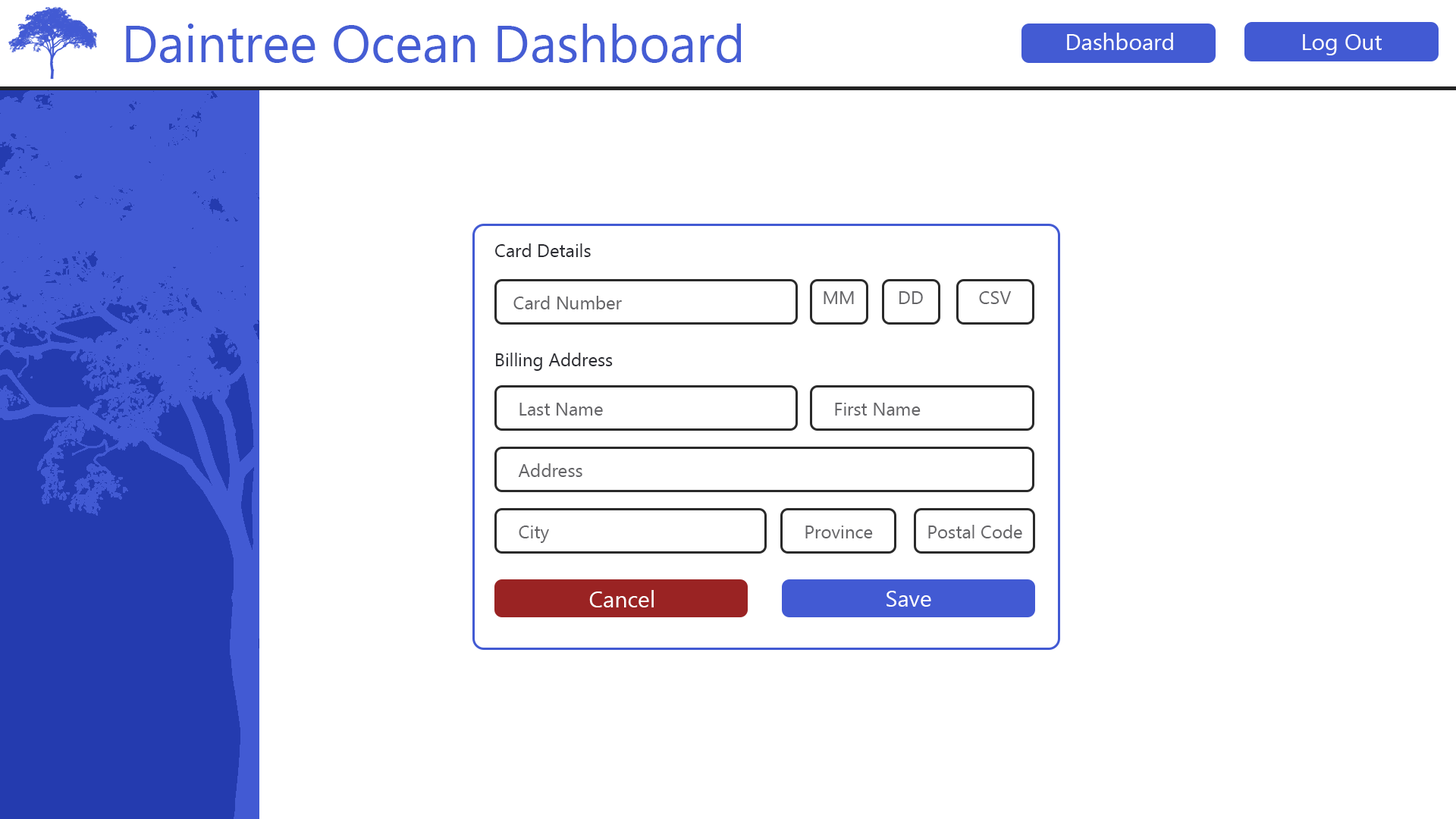
<style>
.page{position:relative;width:1456px;height:819px;background:#ffffff}
.page>*{position:absolute;margin:0}
.t1{font:52.3px "MyanmarText";color:#455dd4}
.t2{font:22.7px "MyanmarText";color:#ffffff}
.t3{font:18.2px "MyanmarText";color:#2c2d33}
.t4{font:22.7px "MyanmarText";color:#2c2d33}
.t5{font:18.2px "MyanmarText";color:#656568}
.t6{font:4.5px "MyanmarText";color:#656568}
</style>
<div class="page">
<p class="t1" style="left:126px;top:24px;width:615px;height:39px">Daintree Ocean Dashboard</p>
<p class="t2" style="left:1067px;top:33px;width:106px;height:17px">Dashboard</p>
<p class="t2" style="left:1303px;top:34px;width:79px;height:21px">Log Out</p>
<p class="t3" style="left:495px;top:243px;width:118px;height:128px"><span class="t4"> <br></span> Card Details<br><br><br> <br><br> Billing Address</p>
<p class="t5" style="left:824px;top:291px;width:30px;height:13px"><span class="t6"><br></span>MM</p>
<p class="t5" style="left:899px;top:291px;width:24px;height:13px"><span class="t6"><br></span>DD</p>
<p class="t5" style="left:979px;top:291px;width:33px;height:13px"><span class="t6"><br></span>CSV</p>
<p class="t5" style="left:513px;top:296px;width:109px;height:13px"><span class="t6"><br>   </span>Card Number</p>
<p class="t5" style="left:519px;top:403px;width:84px;height:13px"><span class="t6"><br>   </span>Last Name</p>
<p class="t5" style="left:835px;top:403px;width:86px;height:13px"><span class="t6"><br>   </span>First Name</p>
<p class="t5" style="left:518px;top:463px;width:64px;height:14px"><span class="t6"><br>   </span>Address</p>
<p class="t5" style="left:519px;top:526px;width:30px;height:17px"><span class="t6"><br>   </span>City</p>
<p class="t5" style="left:805px;top:526px;width:68px;height:12px"><span class="t6"><br>   </span>Province</p>
<p class="t5" style="left:928px;top:525px;width:94px;height:13px"><span class="t6"><br>   </span>Postal Code</p>
<p class="t2" style="left:589px;top:590px;width:65px;height:17px">Cancel</p>
<p class="t2" style="left:886px;top:591px;width:45px;height:16px">Save</p>
</div>
